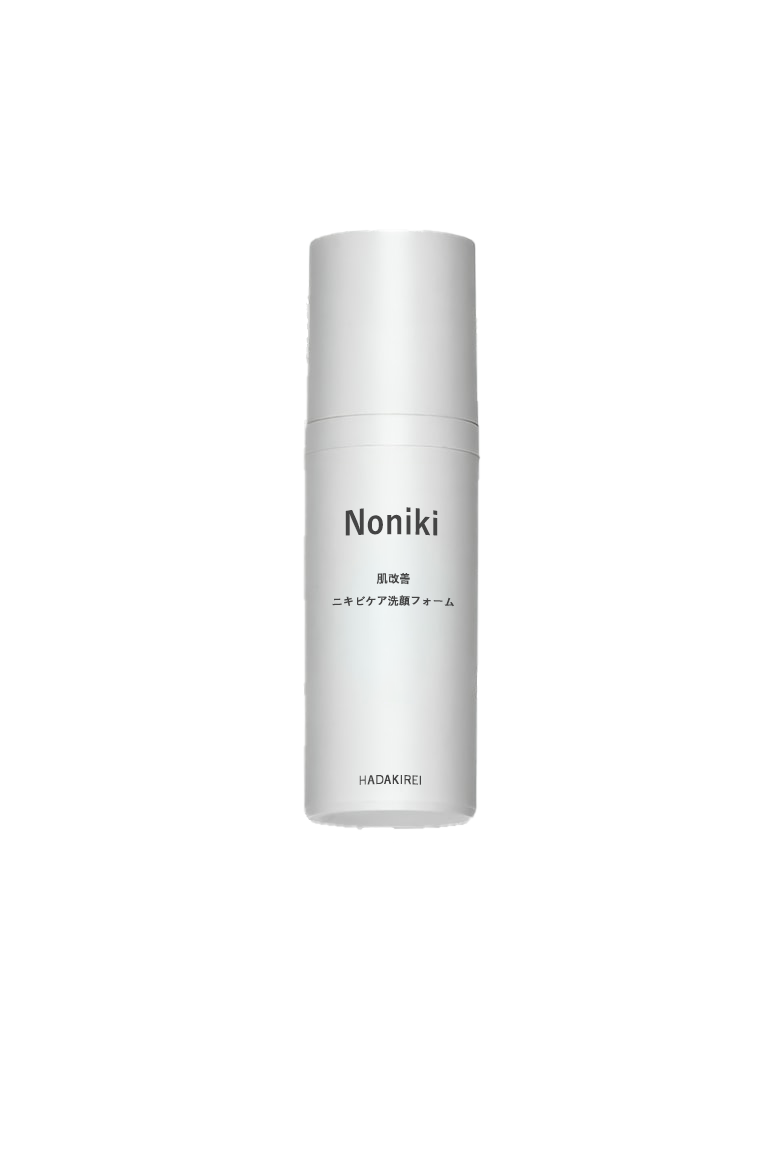
<style>
.page{position:relative;width:774px;height:1161px;background:#ffffff}
.page>*{position:absolute;margin:0}
.t1{font:30px "YuGo-Bold";letter-spacing:0.02em;color:#444444}
.t2{font:11px "YuGo-Bold";letter-spacing:0.02em;color:#444444}
</style>
<div class="page">
<p class="t1" style="left:345px;top:507px;width:93px;height:29px">Noniki</p>
<p class="t2" style="left:376px;top:572px;width:34px;height:13px">肌改善</p>
<p class="t2" style="left:332px;top:595px;width:122px;height:12px">ニキビケア洗顔フォーム</p>
<p class="t2" style="left:359px;top:774px;width:62px;height:11px">HADAKIREI</p>
</div>
